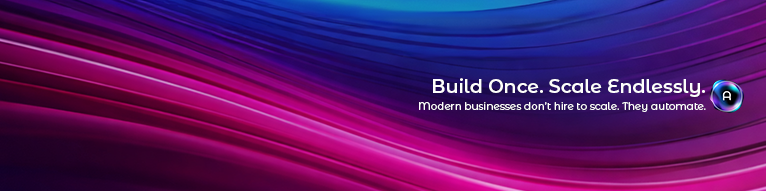
<style>
.page{position:relative;width:766px;height:191px}
.page>*{position:absolute;margin:0}
.t1{font:10.4px/16.7px "MontserratAlternates-Regular";color:#fefefc}
.t2{font:18.8px/25px "MontserratAlternates-SemiBold";color:#fefefc}
</style>
<div class="page">
<p class="t1" style="left:419px;top:78px;width:287px;height:34px;text-align:right"><span class="t2">Build Once. Scale Endlessly.<br></span>Modern businesses don’t hire to scale. They automate.</p>
</div>
